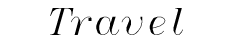
<style>
.page{position:relative;width:236px;height:48px;background:#ffffff}
.page>*{position:absolute;margin:0}
.t1{font:36px "ItalicT";color:#010101}
</style>
<div class="page">
<p class="t1" style="left:50px;top:8px;width:133px;height:27px">Travel</p>
</div>
